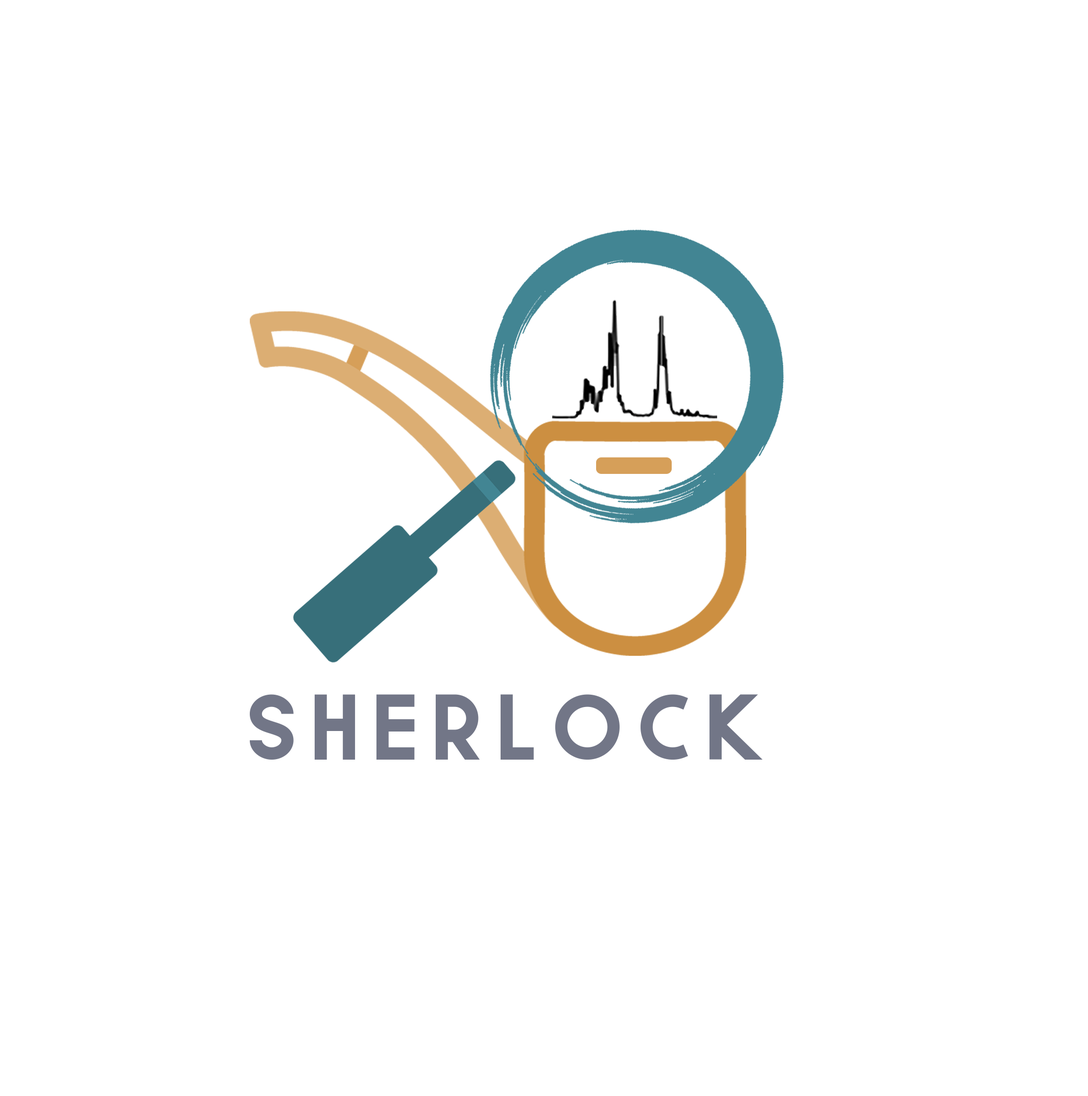
<style>
.page{position:relative;width:1088px;height:1096px;background:#ffffff}
.page>*{position:absolute;margin:0}
.t1{font:75.5px "LessBold";letter-spacing:0.2em;color:#727687}
</style>
<div class="page">
<p class="t1" style="left:250px;top:694px;width:513px;height:65px">SHERLOCK</p>
</div>
